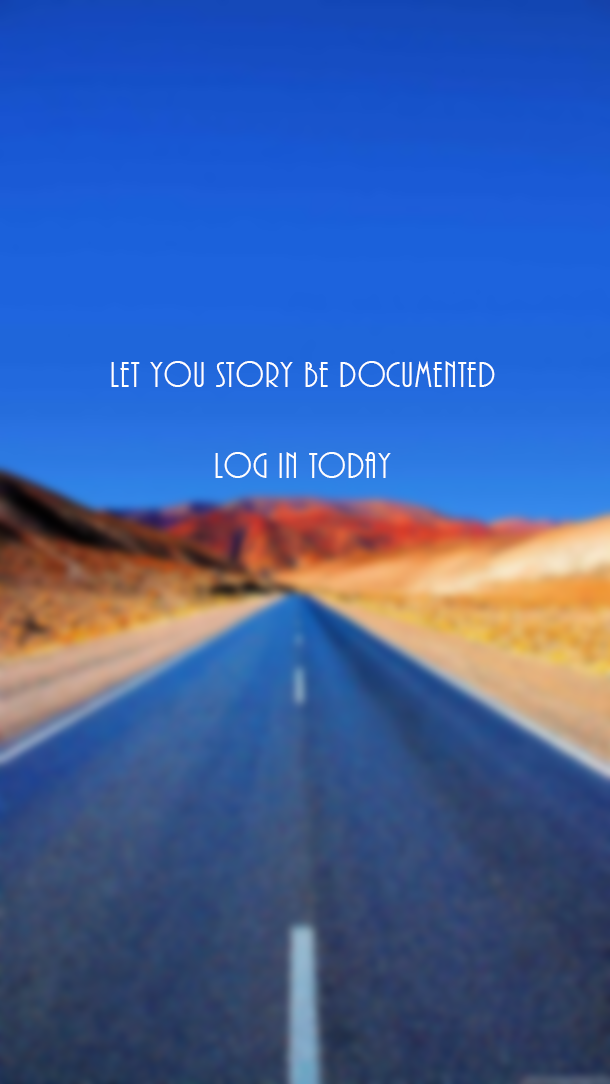
<style>
.page{position:relative;width:610px;height:1084px}
.page>*{position:absolute;margin:0}
.t1{font:38px "ARBONNIE";letter-spacing:0.035em;color:#ffffff}
</style>
<div class="page">
<p class="t1" style="left:111px;top:361px;width:384px;height:117px;text-align:center">let you story be documented<br><br>log in today</p>
</div>
